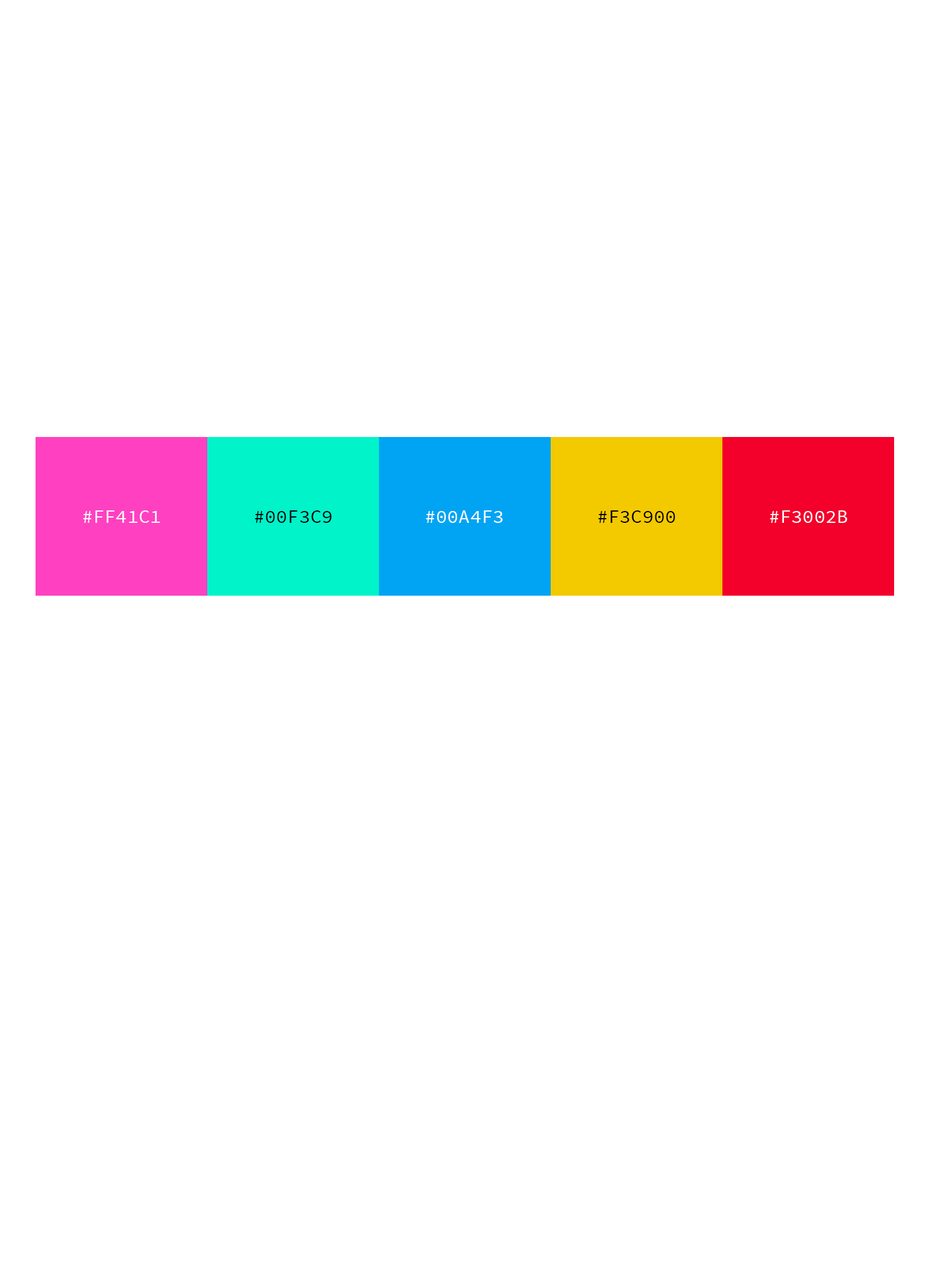
<style>
.page{position:relative;width:932px;height:1279px;background:#ffffff}
.page>*{position:absolute;margin:0}
.t1{font:19px "SourceCodePro-Regular";color:#ffffff;text-transform:uppercase}
.t2{font:19px "SourceCodePro-Regular";color:#000000;text-transform:uppercase}
</style>
<div class="page">
<p class="t1" style="left:83px;top:510px;width:77px;height:13px">#ff41c1</p>
<p class="t2" style="left:255px;top:510px;width:77px;height:13px">#00f3c9</p>
<p class="t1" style="left:426px;top:510px;width:77px;height:13px">#00a4f3</p>
<p class="t2" style="left:598px;top:510px;width:77px;height:13px">#f3c900</p>
<p class="t1" style="left:770px;top:510px;width:77px;height:13px">#f3002b</p>
</div>
